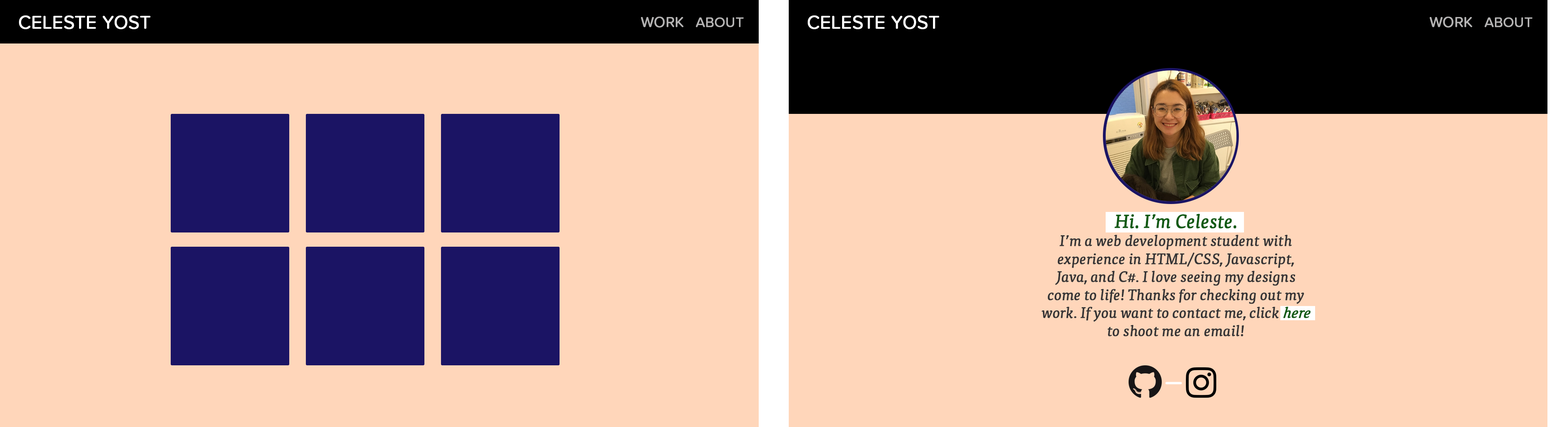
<style>
.page{position:relative;width:1568px;height:427px;background:#ffd6ba}
.page>*{position:absolute;margin:0}
.t1{font:19px "ProximaSoft-Regular";letter-spacing:-0.01em;color:#ffffff;font-weight:bold}
.t2{font:15px "ProximaSoft-Regular";letter-spacing:-0.01em;color:#b5b4b4;font-weight:bold}
.t3{font:14.2px "ProximaSoft-Regular";letter-spacing:-0.01em;color:#b5b4b4;font-weight:bold}
.t4{font:15px "TisaPro-Ita";letter-spacing:-0.01em;color:#363536;font-weight:bold}
.t5{font:19px "TisaPro-Ita";letter-spacing:-0.01em;color:#105a13;font-weight:bold}
.t6{font:15px "TisaPro-Ita";letter-spacing:-0.01em;color:#105a13;font-weight:bold;font-style:italic}
</style>
<div class="page">
<p class="t1" style="left:19px;top:15px;width:132px;height:14px">CELESTE YOST</p>
<p class="t2" style="left:641px;top:17px;width:43px;height:11px">WORK</p>
<p class="t3" style="left:696px;top:17px;width:48px;height:10px">ABOUT</p>
<p class="t1" style="left:808px;top:15px;width:131px;height:14px">CELESTE YOST</p>
<p class="t2" style="left:1430px;top:17px;width:42px;height:11px">WORK</p>
<p class="t3" style="left:1485px;top:17px;width:47px;height:10px">ABOUT</p>
<p class="t4" style="left:1042px;top:214px;width:269px;height:122px;text-align:center"><span class="t5">Hi. I’m Celeste.<br></span>I’m a web development student with<br>experience in HTML/CSS, Javascript,<br>Java, and C#. I love seeing my designs<br>come to life! Thanks for checking out my<br>work. If you want to contact me, click <span class="t6">here<br></span>to shoot me an email!</p>
</div>
